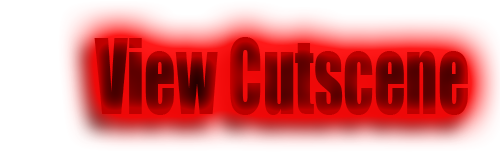
<style>
.page{position:relative;width:500px;height:160px;background:#ffffff}
.page>*{position:absolute;margin:0}
.t1{font:96px "Impact";scale:0.65 1}
</style>
<div class="page">
<p class="t1" style="left:94px;top:37px;width:374px;height:78px">View Cutscene</p>
</div>
